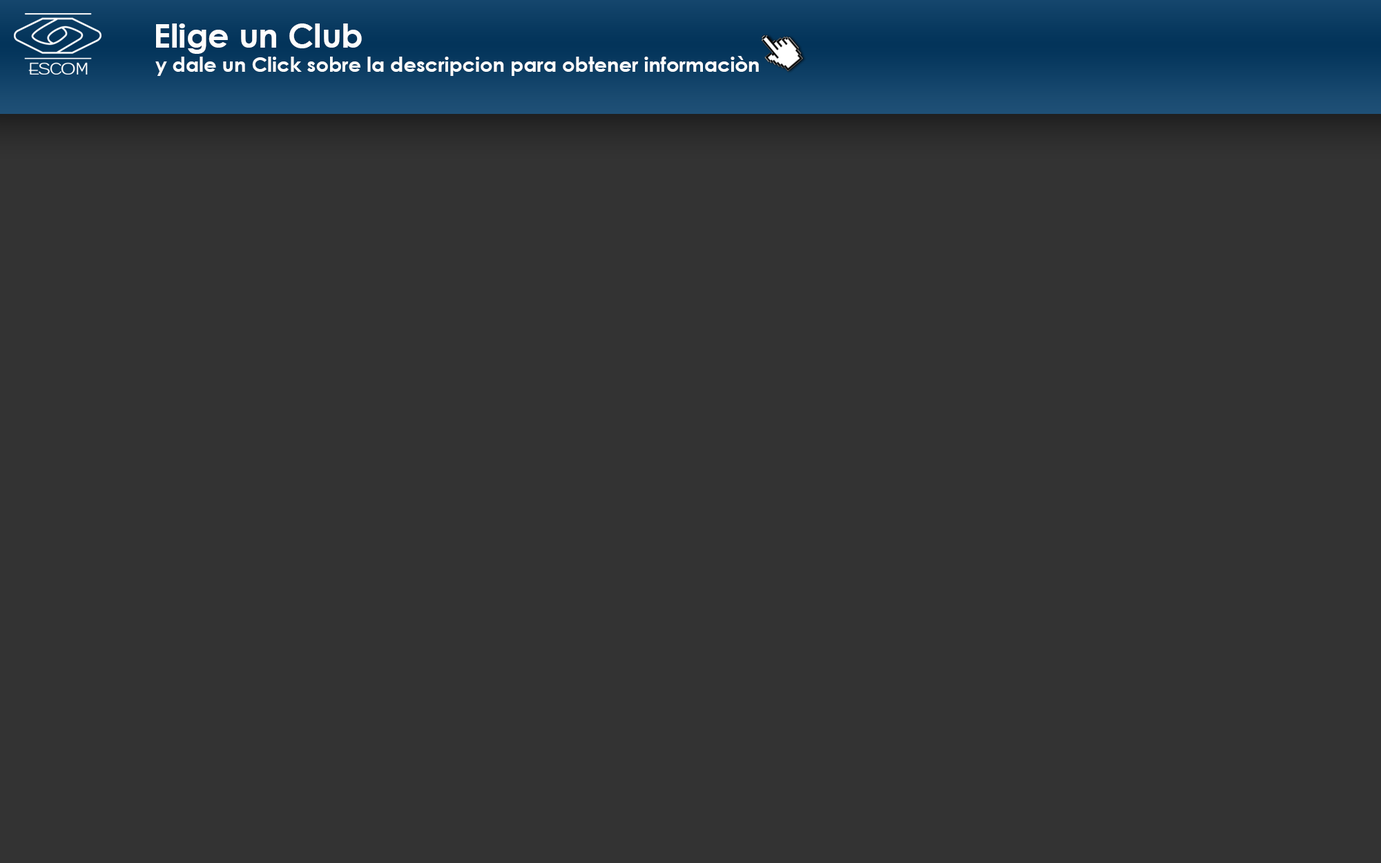
<style>
.page{position:relative;width:1381px;height:863px;background:#333333}
.page>*{position:absolute;margin:0}
.t1{font:20px "CenturyGothic-Bold";color:#fdfdfd}
.t2{font:33.2px "CenturyGothic-Bold";color:#fdfdfd}
</style>
<div class="page">
<p class="t1" style="left:155px;top:23px;width:604px;height:53px"><span class="t2">    Elige un Club<br></span>       y dale un Click sobre la descripcion para obtener informaciòn</p>
</div>
